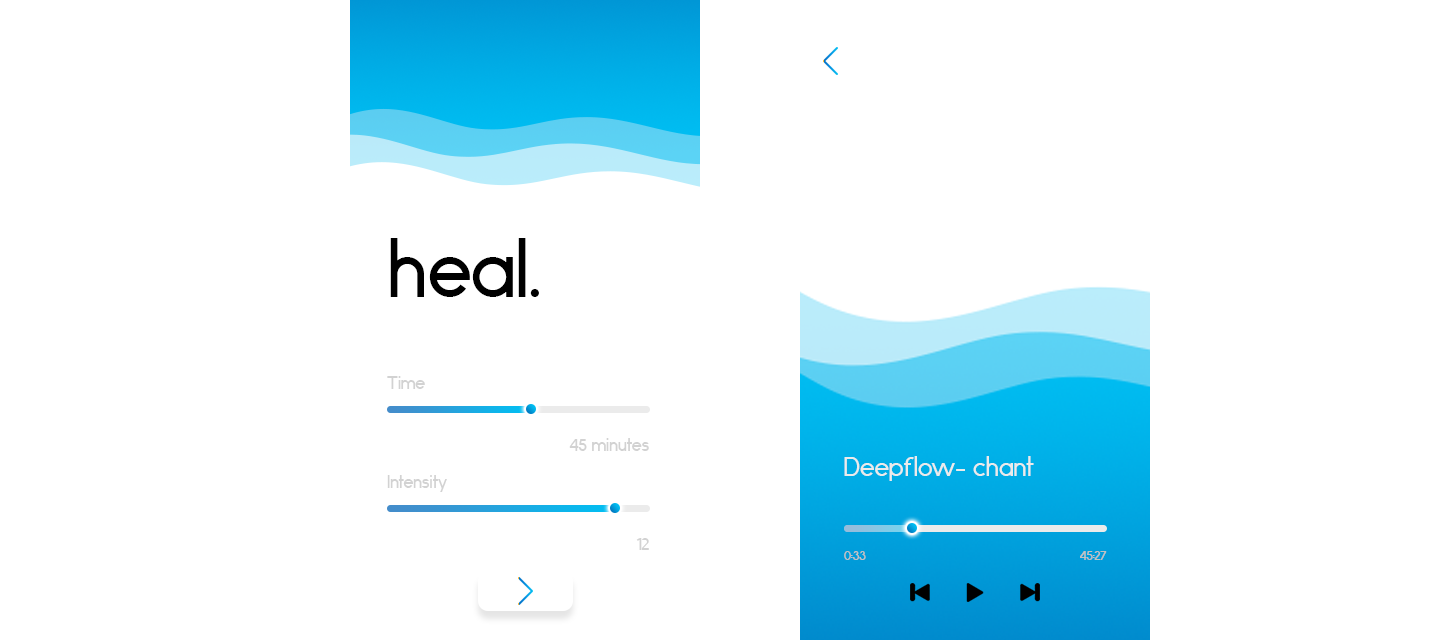
<style>
.page{position:relative;width:1436px;height:640px;background:#ffffff}
.page>*{position:absolute;margin:0}
.t1{font:75px "Anke";color:#000000}
.t2{font:16.7px "Anke";color:#d2d2d2}
.t3{font:25px "Anke";color:#ebebeb}
.t4{font:12.5px "Anke";color:#c2c2c2}
</style>
<div class="page">
<p class="t1" style="left:390px;top:238px;width:149px;height:59px">heal.</p>
<p class="t2" style="left:387px;top:376px;width:38px;height:13px">Time</p>
<p class="t2" style="left:569px;top:438px;width:80px;height:13px">45 minutes</p>
<p class="t3" style="left:844px;top:456px;width:190px;height:25px">Deepflow- chant</p>
<p class="t2" style="left:387px;top:475px;width:60px;height:17px">Intensity</p>
<p class="t2" style="left:636px;top:538px;width:13px;height:12px">12</p>
<p class="t4" style="left:844px;top:551px;width:22px;height:9px">0:33</p>
<p class="t4" style="left:1080px;top:551px;width:27px;height:9px">45:27</p>
</div>
